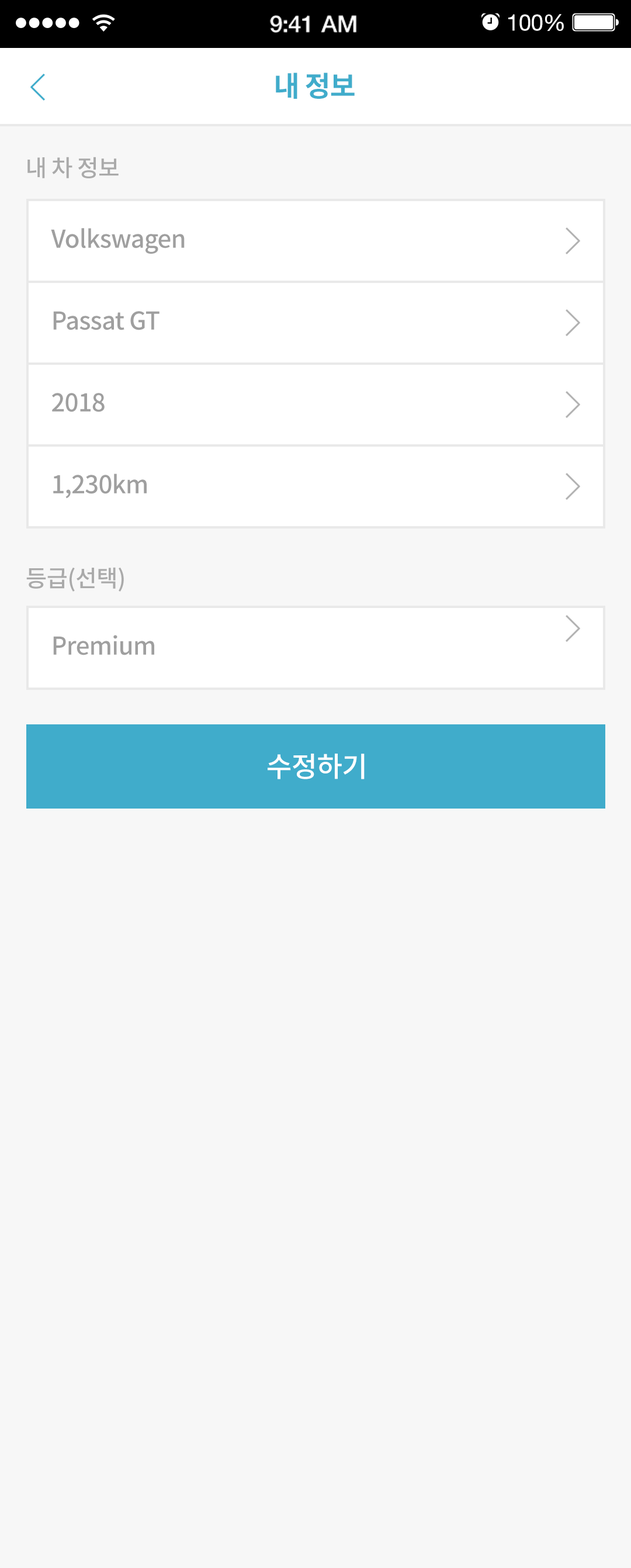
<style>
.page{position:relative;width:631px;height:1568px;background:#f7f7f7}
.page>*{position:absolute;margin:0}
.t1{font:23.5px "HelveticaNeue-Medium";letter-spacing:-0.02em;color:#ffffff}
.t2{font:22.6px "HelveticaNeue";letter-spacing:-0.02em;color:#ffffff}
.t3{font:28.1px "NotoSansCJKkr-Bold";letter-spacing:-0.02em;color:#40accb}
.t4{font:23.4px "NotoSansCJKkr-Medium";letter-spacing:-0.02em;color:#aaaaaa}
.t5{font:24.6px "NotoSansCJKkr-Medium";letter-spacing:-0.02em;color:#9f9f9f}
.t6{font:28.1px "NotoSansCJKkr-Medium";letter-spacing:-0.02em;color:#ffffff}
</style>
<div class="page">
<p class="t1" style="left:270px;top:15px;width:87px;height:18px">9:41 AM</p>
<p class="t2" style="left:509px;top:14px;width:55px;height:17px">100%</p>
<p class="t3" style="left:276px;top:72px;width:79px;height:27px">내 정보</p>
<p class="t4" style="left:27px;top:157px;width:92px;height:21px">내 차 정보</p>
<p class="t5" style="left:51px;top:228px;width:134px;height:26px">Volkswagen</p>
<p class="t5" style="left:53px;top:311px;width:107px;height:19px">Passat GT</p>
<p class="t5" style="left:52px;top:393px;width:53px;height:19px">2018</p>
<p class="t5" style="left:53px;top:474px;width:94px;height:25px">1,230km</p>
<p class="t4" style="left:26px;top:567px;width:98px;height:25px">등급(선택)</p>
<p class="t5" style="left:53px;top:635px;width:101px;height:20px">Premium</p>
<p class="t6" style="left:268px;top:754px;width:97px;height:25px">수정하기</p>
</div>
